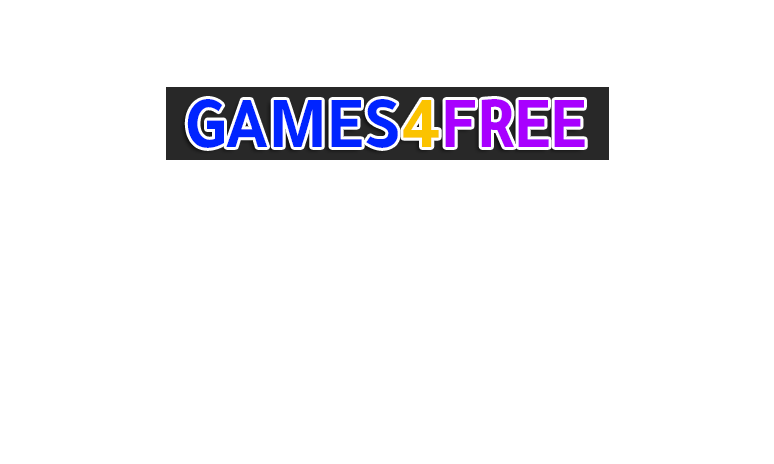
<style>
.page{position:relative;width:774px;height:464px;background:#ffffff}
.page>*{position:absolute;margin:0}
.t1{font:74.4px "Tajawal-Bold";color:#0024ff;scale:0.95 1}
.t2{font:74.4px "Tajawal-Bold";color:#fbc300;scale:0.95 1}
.t3{font:74.4px "Tajawal-Bold";color:#a800ff;scale:0.95 1}
</style>
<div class="page">
<p class="t1" style="left:187px;top:99px;width:398px;height:49px">GAMES<span class="t2">4</span><span class="t3">FREE</span></p>
</div>
